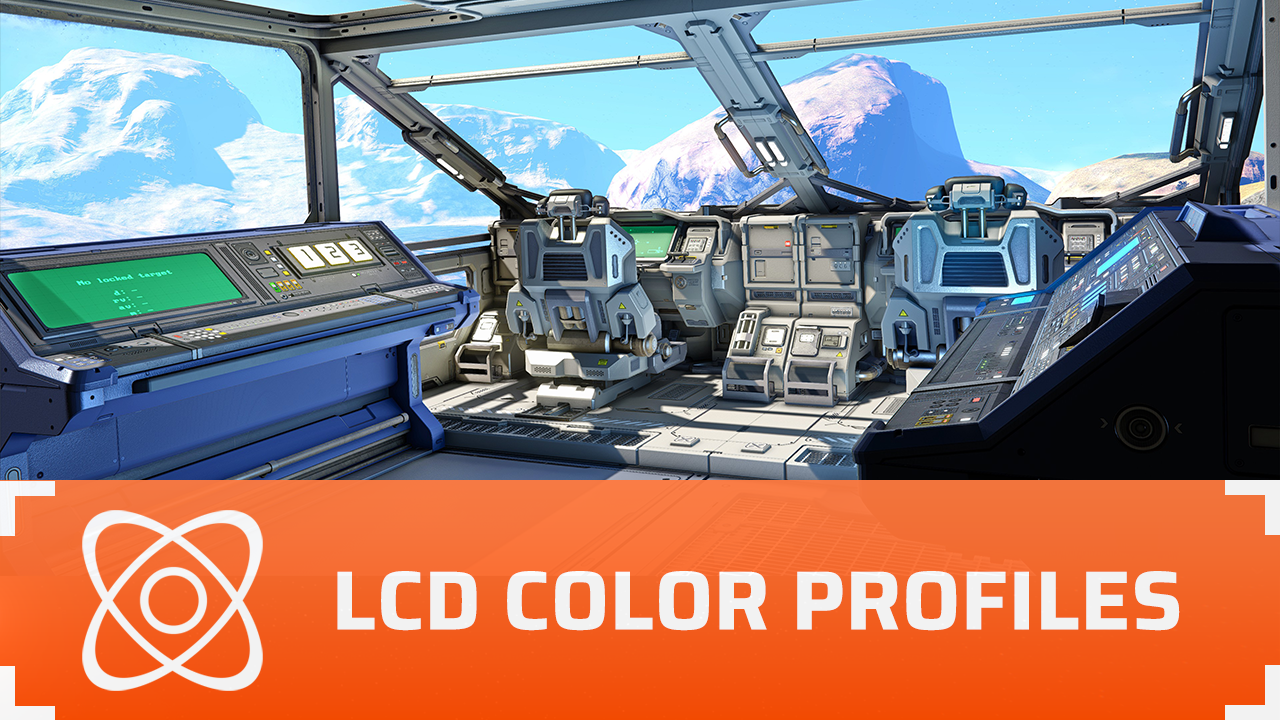
<style>
.page{position:relative;width:1280px;height:720px}
.page>*{position:absolute;margin:0}
.t1{font:84px "SairaRoman-Bold";color:#ffffff;text-transform:uppercase;font-weight:bold}
</style>
<div class="page">
<p class="t1" style="left:337px;top:571px;width:843px;height:60px">LCD Color Profiles</p>
</div>
